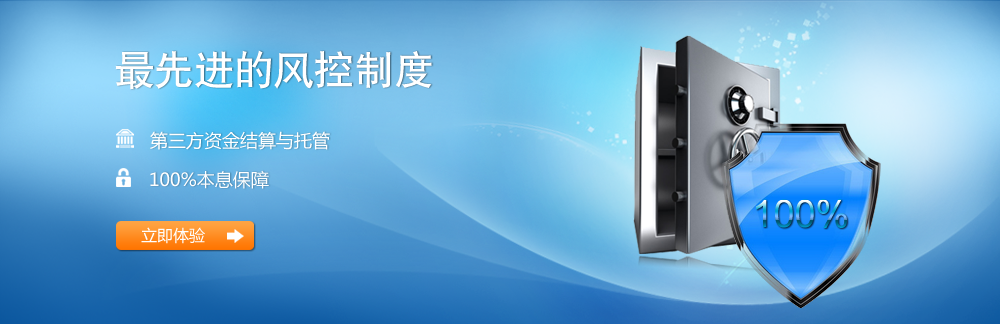
<style>
.page{position:relative;width:1000px;height:324px}
.page>*{position:absolute;margin:0}
.t1{font:40px "HeitiCSEG-Medium-GB";color:#ffffff}
.t2{font:18px "MicrosoftYaHei";color:#ffffff}
.t3{font:38px "ArialMT"}
.t4{font:16px "MicrosoftYaHei";color:#ffffff}
</style>
<div class="page">
<p class="t1" style="left:115px;top:50px;width:317px;height:40px">最先进的风控制度</p>
<p class="t2" style="left:150px;top:131px;width:180px;height:19px">第三方资金结算与托管</p>
<p class="t2" style="left:150px;top:170px;width:119px;height:19px">100%本息保障</p>
<p class="t3" style="left:756px;top:199px;width:91px;height:29px">100%</p>
<p class="t4" style="left:141px;top:227px;width:64px;height:17px">立即体验</p>
</div>
